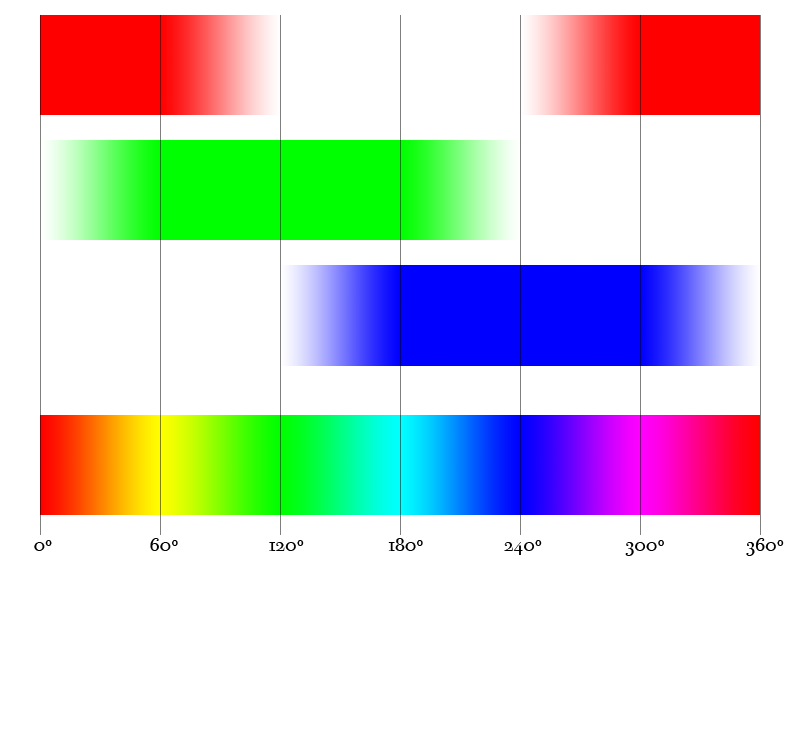
<style>
.page{position:relative;width:800px;height:750px;background:#ffffff}
.page>*{position:absolute;margin:0}
.t1{font:20px "BodoniSvtyTwoOSITCTTBook";letter-spacing:0.015em;color:#000000}
</style>
<div class="page">
<p class="t1" style="left:34px;top:540px;width:18px;height:11px">0º</p>
<p class="t1" style="left:150px;top:538px;width:28px;height:13px">60º</p>
<p class="t1" style="left:269px;top:540px;width:35px;height:11px">120º</p>
<p class="t1" style="left:388px;top:538px;width:35px;height:13px">180º</p>
<p class="t1" style="left:504px;top:540px;width:38px;height:15px">240º</p>
<p class="t1" style="left:625px;top:540px;width:39px;height:16px">300º</p>
<p class="t1" style="left:746px;top:538px;width:38px;height:18px">360º</p>
</div>
